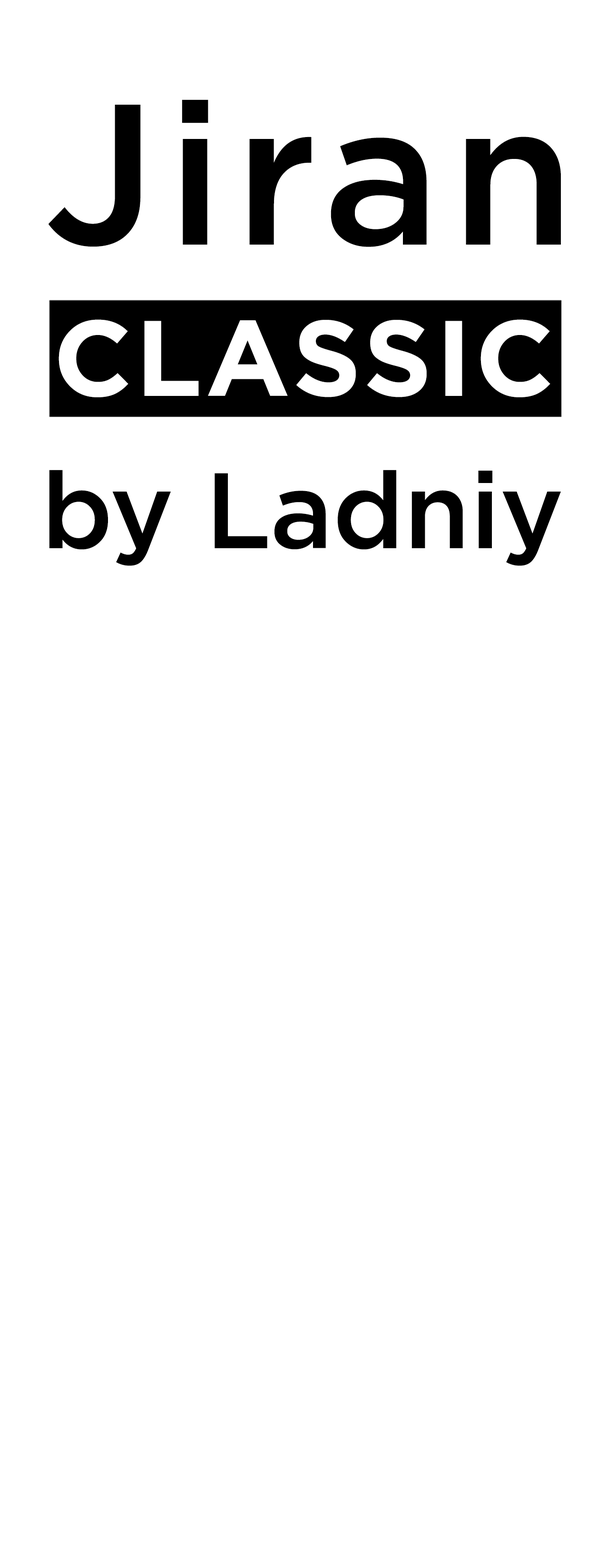
<style>
.page{position:relative;width:607px;height:1568px;background:#ffffff}
.page>*{position:absolute;margin:0}
.t1{font:199.9px "Gotham-Medium";letter-spacing:0.054em;color:#000000}
.t2{font:107.1px "Gotham-Bold";letter-spacing:0.033em;color:#ffffff}
.t3{font:107.1px "Gotham-Medium";letter-spacing:-0.005em;color:#000000}
</style>
<div class="page">
<p class="t1" style="left:48px;top:99px;width:513px;height:148px">Jiran</p>
<p class="t2" style="left:59px;top:319px;width:492px;height:78px">CLASSIC</p>
<p class="t3" style="left:49px;top:470px;width:512px;height:96px">by Ladniy</p>
</div>
